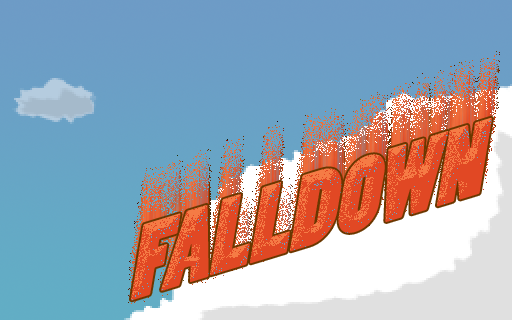
<style>
.page{position:relative;width:512px;height:320px}
.page>*{position:absolute;margin:0}
.t1{font:96px "PoplarStd";color:#e14824;text-transform:uppercase;font-style:italic;scale:1.05 1}
</style>
<div class="page">
<p class="t1" style="left:131px;top:117px;width:361px;height:184px;rotate:-17deg">Falldown</p>
</div>
